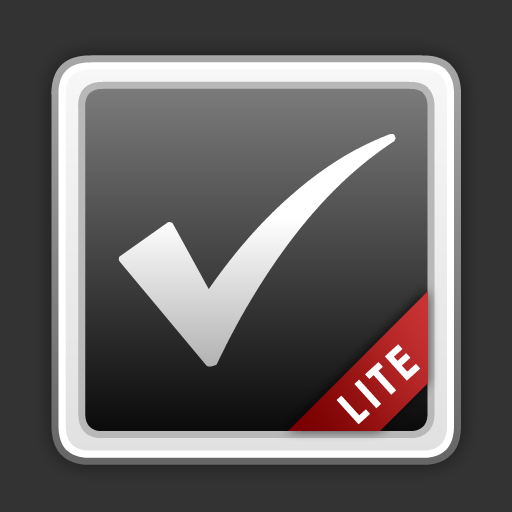
<style>
.page{position:relative;width:512px;height:512px;background:#333333}
.page>*{position:absolute;margin:0}
.t1{font:45.2px "CenturyGothic-Bold";letter-spacing:0.1em;color:#ffffff}
</style>
<div class="page">
<p class="t1" style="left:336px;top:344px;width:84px;height:81px;rotate:-42deg">LITE</p>
</div>
